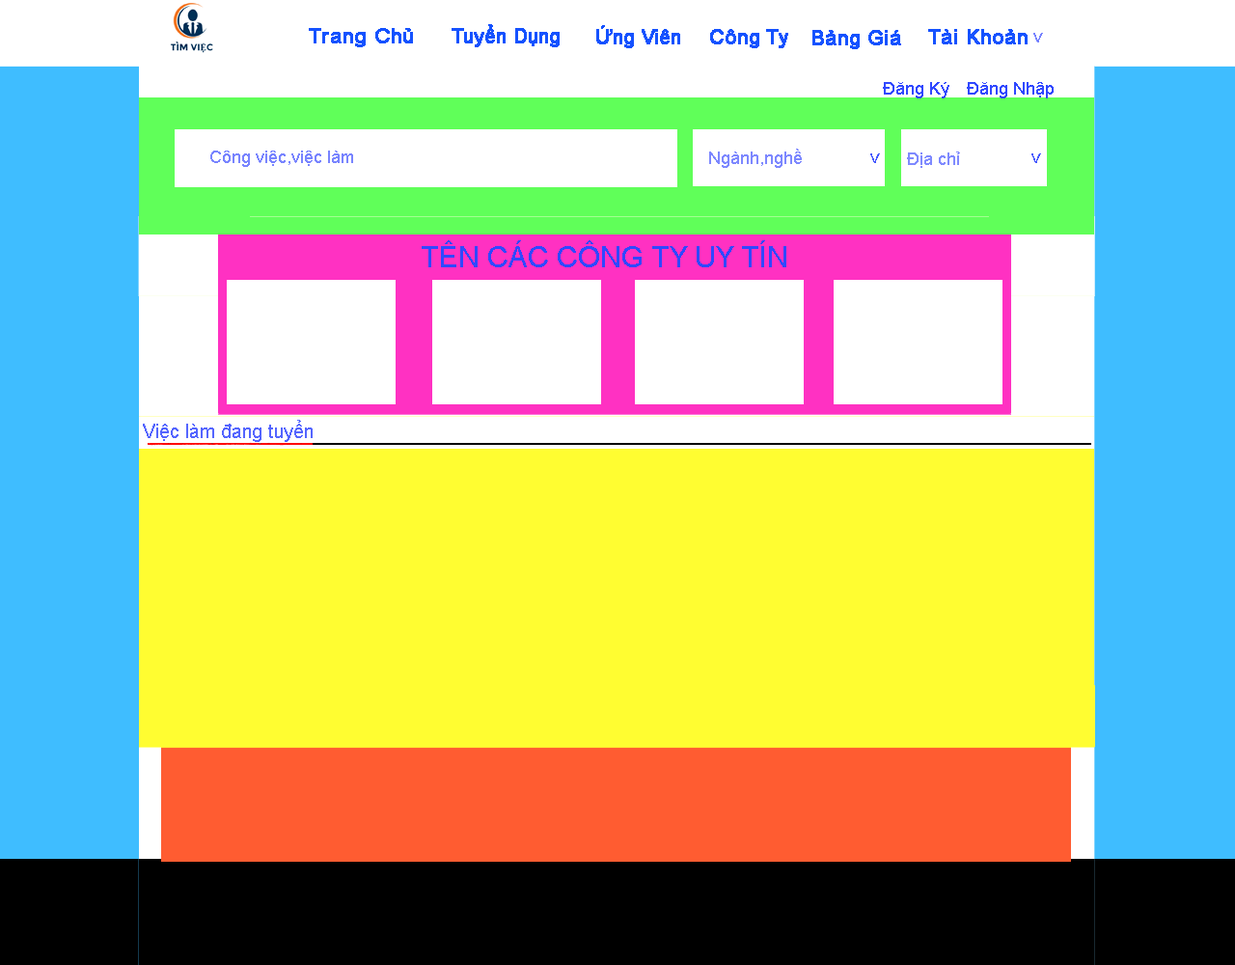
<style>
.page{position:relative;width:1235px;height:965px;background:#fffd31}
.page>*{position:absolute;margin:0}
.t1{font:20.3px "ArialMT";color:#1552ff;font-weight:bold;scale:1.04 1}
.t2{font:19px "ArialMT";color:#1552ff;font-weight:bold}
.t3{font:20.3px "ArialMT";color:#1552ff;font-weight:bold}
.t4{font:20.3px "ArialMT";color:#7480ff}
.t5{font:17.4px "ArialMT";color:#3048ff}
.t6{font:17.4px "ArialMT";color:#7d88ff}
.t7{font:17.4px "ArialMT";color:#7884ff}
.t8{font:20.3px "ArialMT";color:#3048ff}
.t9{font:17.4px "ArialMT";color:#7f8aff}
.t10{font:29px "ArialMT";color:#3048ff}
.t11{font:19.3px "ArialMT";color:#5465ff}
</style>
<div class="page">
<p class="t1" style="left:309px;top:28px;width:104px;height:19px">Trang Chủ</p>
<p class="t2" style="left:452px;top:24px;width:108px;height:23px">Tuyển Dụng</p>
<p class="t2" style="left:596px;top:25px;width:84px;height:23px">Ứng Viên</p>
<p class="t3" style="left:710px;top:29px;width:79px;height:19px">Công Ty</p>
<p class="t3" style="left:813px;top:30px;width:88px;height:19px">Bảng Giá</p>
<p class="t3" style="left:929px;top:29px;width:99px;height:15px">Tài Khoản</p>
<p class="t4" style="left:1034px;top:33px;width:9px;height:9px;rotate:-89deg">&lt;</p>
<p class="t5" style="left:883px;top:82px;width:67px;height:16px">Đăng Ký</p>
<p class="t5" style="left:967px;top:82px;width:87px;height:16px">Đăng Nhập</p>
<p class="t6" style="left:709px;top:149px;width:93px;height:19px">Ngành,nghề</p>
<p class="t7" style="left:210px;top:151px;width:143px;height:16px">Công việc,việc làm</p>
<p class="t8" style="left:871px;top:153px;width:9px;height:10px;rotate:-90deg;opacity:0.95">&lt;</p>
<p class="t9" style="left:907px;top:152px;width:53px;height:16px">Địa chỉ</p>
<p class="t8" style="left:1032px;top:153px;width:9px;height:10px;rotate:-90deg;opacity:0.95">&lt;</p>
<p class="t10" style="left:422px;top:240px;width:365px;height:27px">TÊN CÁC CÔNG TY UY TÍN</p>
<p class="t11" style="left:143px;top:420px;width:170px;height:22px">Việc làm đang tuyển</p>
</div>
